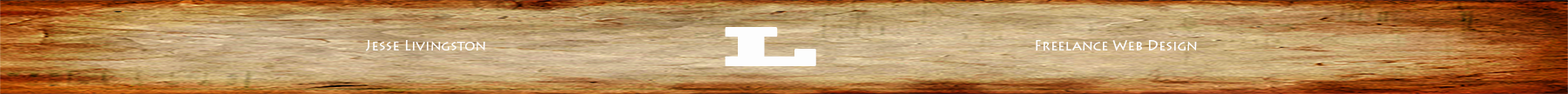
<style>
.page{position:relative;width:1568px;height:94px}
.page>*{position:absolute;margin:0}
.t1{font:52.3px "BlackoakStd";color:#fdfdfd}
.t2{font:13.9px "LithosPro-Regular";color:#fdfdfd}
</style>
<div class="page">
<p class="t1" style="left:725px;top:27px;width:91px;height:39px">L</p>
<p class="t2" style="left:366px;top:40px;width:119px;height:11px">Jesse Livingston</p>
<p class="t2" style="left:1036px;top:39px;width:161px;height:12px">Freelance Web Design</p>
</div>
